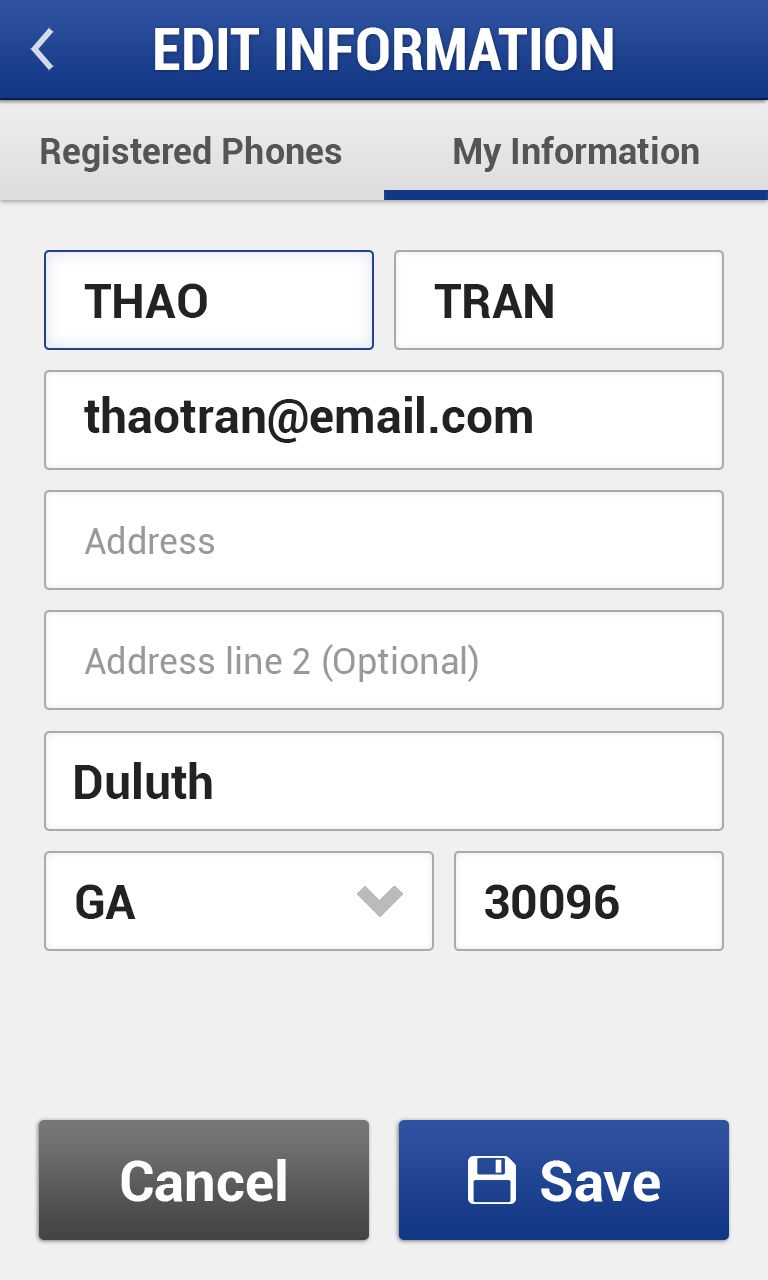
<style>
.page{position:relative;width:768px;height:1280px;background:#f0f0f0}
.page>*{position:absolute;margin:0}
.t1{font:60px "Roboto-BoldCondensed";color:#ffffff}
.t2{font:36px "Roboto-Bold";color:#555555}
.t3{font:48px "Roboto-Bold";color:#222222}
.t4{font:36px "Roboto-Regular";color:#999999}
.t5{font:56px "Roboto-Bold";color:#ffffff}
</style>
<div class="page">
<p class="t1" style="left:155px;top:27px;width:458px;height:44px">EDIT INFORMATION</p>
<p class="t2" style="left:41px;top:136px;width:301px;height:36px">Registered Phones</p>
<p class="t2" style="left:454px;top:136px;width:245px;height:36px">My Information</p>
<p class="t3" style="left:84px;top:283px;width:123px;height:35px">THAO</p>
<p class="t3" style="left:434px;top:284px;width:119px;height:34px">TRAN</p>
<p class="t3" style="left:84px;top:396px;width:448px;height:47px">thaotran@email.com</p>
<p class="t4" style="left:84px;top:526px;width:130px;height:28px">Address</p>
<p class="t4" style="left:84px;top:644px;width:394px;height:38px">Address line 2 (Optional)</p>
<p class="t3" style="left:75px;top:762px;width:137px;height:37px">Duluth</p>
<p class="t3" style="left:76px;top:884px;width:60px;height:35px">GA</p>
<p class="t3" style="left:485px;top:884px;width:134px;height:35px">30096</p>
<p class="t5" style="left:121px;top:1159px;width:165px;height:43px">Cancel</p>
<p class="t5" style="left:541px;top:1160px;width:119px;height:42px">Save</p>
</div>
